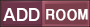
<style>
.page{position:relative;width:90px;height:27px;background:#6d3549}
.page>*{position:absolute;margin:0}
.t1{font:18px "À¸¶äÃ¼";color:#ffffff;text-transform:uppercase}
.t2{font:14px "À¸¶äÃ¼";color:#ffffff;text-transform:uppercase;font-weight:bold}
</style>
<div class="page">
<p class="t1" style="left:3px;top:8px;width:37px;height:13px">ADD</p>
<p class="t2" style="left:46px;top:9px;width:42px;height:12px">room</p>
</div>
